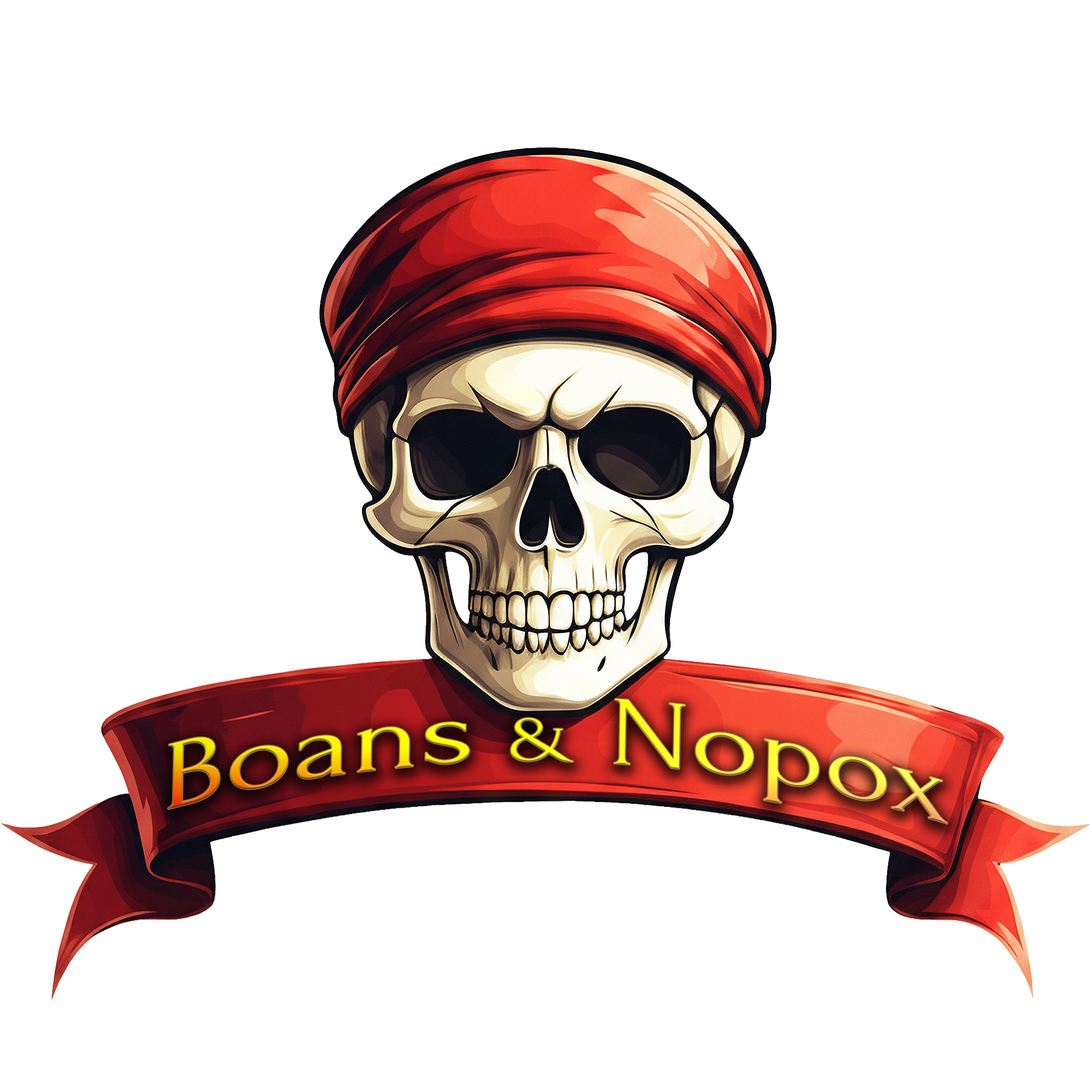
<style>
.page{position:relative;width:1092px;height:1092px;background:#ffffff}
.page>*{position:absolute;margin:0}
.t1{font:96.9px "Forum";scale:1.33 1}
.t2{font:65.3px "Forum";scale:1.33 1}
</style>
<div class="page">
<p class="t1" style="left:168px;top:698px;width:779px;height:126px;rotate:1deg">Boans <span class="t2">&amp;</span> Nopox</p>
</div>
